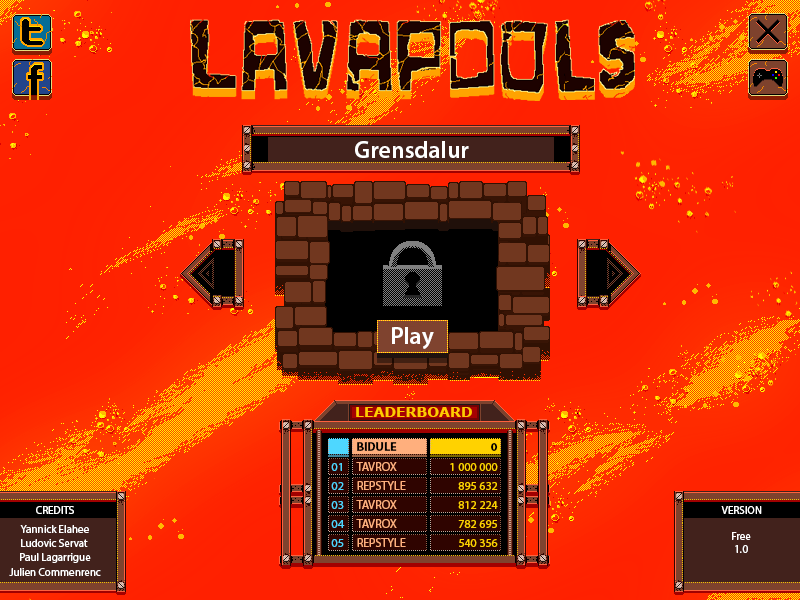
<style>
.page{position:relative;width:800px;height:600px}
.page>*{position:absolute;margin:0}
.t1{font:24px "MyriadPro-Semibold";color:#ffffff}
.t2{font:14px "Verdana-Bold";color:#ffcc00}
.t3{font:12px "MyriadPro-Bold";color:#000000}
.t4{font:12px "MyriadPro-Regular";color:#ffaf7d}
.t5{font:12px "MyriadPro-Regular";color:#4ed7ff}
.t6{font:12px "MyriadPro-Regular";color:#ffd200}
.t7{font:11px "MyriadPro-Regular";color:#ffffff}
</style>
<div class="page">
<p class="t1" style="left:355px;top:141px;width:114px;height:17px">Grensdalur</p>
<p class="t1" style="left:392px;top:327px;width:42px;height:22px">Play</p>
<p class="t2" style="left:356px;top:407px;width:116px;height:10px">LEADERBOARD</p>
<p class="t3" style="left:357px;top:442px;width:40px;height:9px">BIDULE</p>
<p class="t3" style="left:491px;top:443px;width:7px;height:8px">0</p>
<p class="t4" style="left:356px;top:462px;width:41px;height:9px">TAVROX</p>
<p class="t5" style="left:331px;top:463px;width:11px;height:8px">01</p>
<p class="t6" style="left:450px;top:463px;width:48px;height:8px">1 000 000</p>
<p class="t5" style="left:331px;top:482px;width:13px;height:8px">02</p>
<p class="t4" style="left:357px;top:481px;width:49px;height:9px">REPSTYLE</p>
<p class="t6" style="left:458px;top:482px;width:40px;height:8px">895 632</p>
<p class="t7" style="left:36px;top:506px;width:38px;height:8px">CREDITS</p>
<p class="t5" style="left:331px;top:501px;width:13px;height:8px">03</p>
<p class="t4" style="left:356px;top:500px;width:41px;height:9px">TAVROX</p>
<p class="t6" style="left:458px;top:501px;width:40px;height:8px">812 224</p>
<p class="t7" style="left:721px;top:506px;width:41px;height:8px">VERSION</p>
<p class="t5" style="left:331px;top:520px;width:14px;height:8px">04</p>
<p class="t4" style="left:356px;top:519px;width:41px;height:9px">TAVROX</p>
<p class="t6" style="left:458px;top:520px;width:39px;height:8px">782 695</p>
<p class="t7" style="left:20px;top:525px;width:69px;height:8px">Yannick Elahee</p>
<p class="t7" style="left:732px;top:532px;width:19px;height:21px;text-align:center">Free<br>1.0</p>
<p class="t7" style="left:21px;top:539px;width:67px;height:8px">Ludovic Servat</p>
<p class="t5" style="left:331px;top:539px;width:13px;height:8px">05</p>
<p class="t4" style="left:357px;top:538px;width:49px;height:9px">REPSTYLE</p>
<p class="t6" style="left:459px;top:539px;width:39px;height:8px">540 356</p>
<p class="t7" style="left:20px;top:553px;width:71px;height:10px">Paul Lagarrigue</p>
<p class="t7" style="left:9px;top:568px;width:92px;height:8px">Julien Commenrenc</p>
</div>
